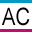
<style>
.page{position:relative;width:32px;height:32px;background:#ffffff}
.page>*{position:absolute;margin:0}
.t1{font:24px "ArialMT";color:#000000;scale:0.85 1}
</style>
<div class="page">
<p class="t1" style="left:2px;top:7px;width:28px;height:19px">AC</p>
</div>
